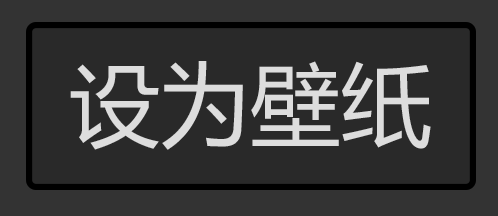
<style>
.page{position:relative;width:498px;height:216px;background:#292929}
.page>*{position:absolute;margin:0}
.t1{font:90.6px "MicrosoftYaHei";color:#dddddd}
</style>
<div class="page">
<p class="t1" style="left:70px;top:61px;width:361px;height:89px">设为壁纸</p>
</div>
